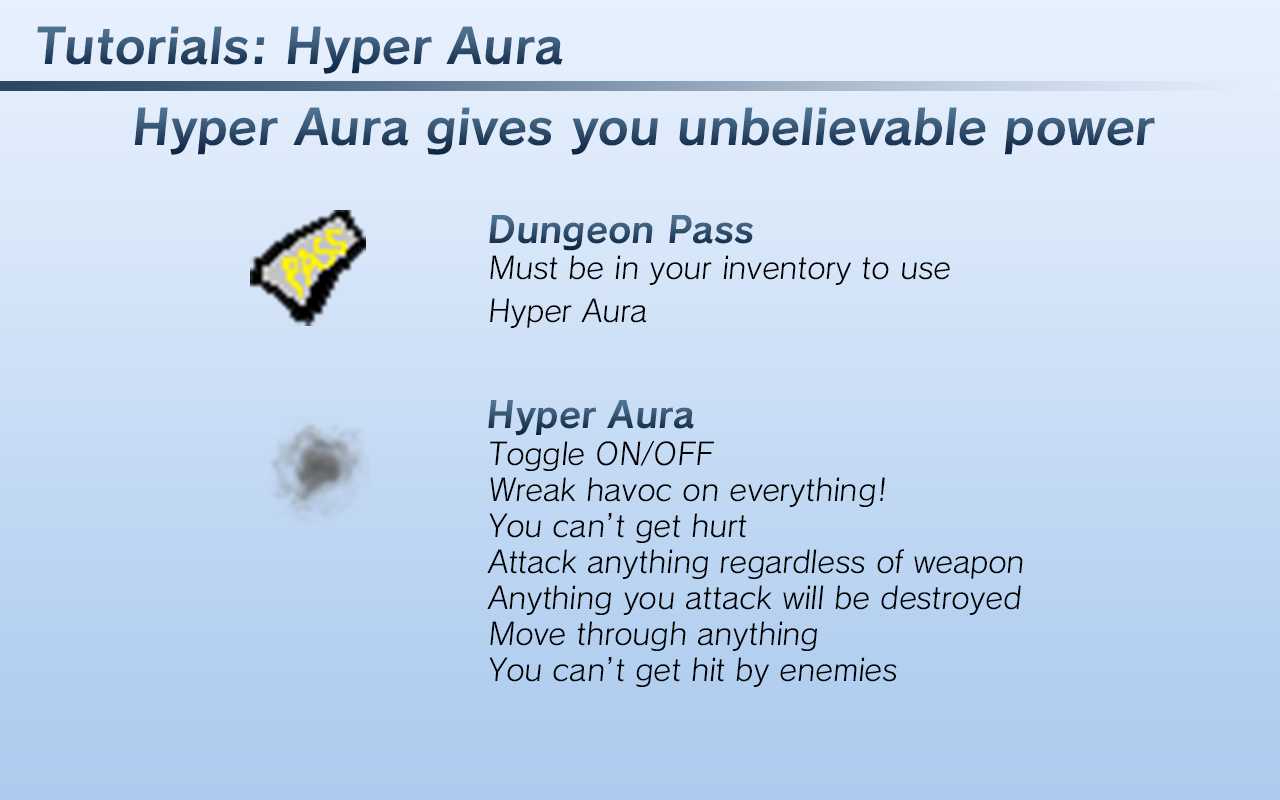
<style>
.page{position:relative;width:1280px;height:800px}
.page>*{position:absolute;margin:0}
.t1{font:48px "Calamity-Bold"}
.t2{font:36px "Calamity-Bold"}
.t3{font:30px "Calamity-Regular";color:#000000}
</style>
<div class="page">
<p class="t1" style="left:37px;top:26px;width:526px;height:48px">Tutorials: Hyper Aura</p>
<p class="t1" style="left:134px;top:107px;width:1021px;height:48px">Hyper Aura gives you unbelievable power</p>
<p class="t2" style="left:489px;top:215px;width:264px;height:36px">Dungeon Pass</p>
<p class="t3" style="left:490px;top:255px;width:460px;height:73px">Must be in your inventory to use<br>Hyper Aura</p>
<p class="t2" style="left:488px;top:400px;width:206px;height:36px">Hyper Aura</p>
<p class="t3" style="left:487px;top:440px;width:536px;height:247px">Toggle ON/OFF<br>Wreak havoc on everything!<br>You can’t get hurt<br>Attack anything regardless of weapon<br>Anything you attack will be destroyed<br>Move through anything<br>You can’t get hit by enemies</p>
</div>
